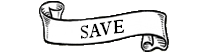
<style>
.page{position:relative;width:204px;height:52px;background:#ffffff}
.page>*{position:absolute;margin:0}
.t1{font:22px "Perpetua";color:#000000}
</style>
<div class="page">
<p class="t1" style="left:80px;top:19px;width:45px;height:20px;rotate:-2deg">SAVE</p>
</div>
